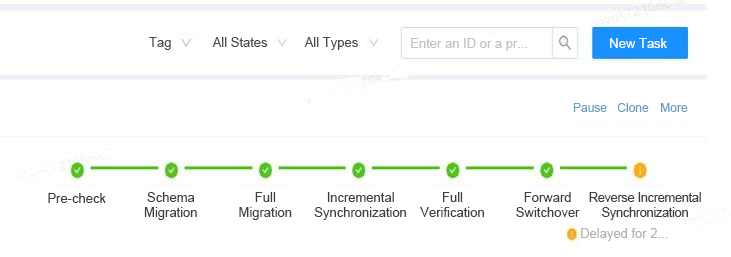
<style>
.page{position:relative;width:731px;height:257px;background:#ffffff}
.page>*{position:absolute;margin:0}
.t1{font:13px "ArialMT";color:#494949}
.t2{font:13px "ArialMT";color:#c2c2c2}
.t3{font:13px "ArialMT";color:#ffffff}
.t4{font:12px "ArialMT";color:#689ebe}
.t5{font:13px "ArialMT";color:#3f3f3f}
.t6{font:13px/15px "ArialMT";color:#3f3f3f}
.t7{font:13px/15px "ArialMT";letter-spacing:-0.03em;color:#3f3f3f}
.t8{font:13px "ArialMT";color:#b2b2b2}
</style>
<div class="page">
<p class="t1" style="left:149px;top:37px;width:22px;height:13px">Tag</p>
<p class="t1" style="left:212px;top:37px;width:56px;height:10px">All States</p>
<p class="t1" style="left:304px;top:37px;width:54px;height:13px">All Types</p>
<p class="t2" style="left:411px;top:38px;width:117px;height:13px">Enter an ID or a pr...</p>
<p class="t3" style="left:610px;top:38px;width:57px;height:10px">New Task</p>
<p class="t4" style="left:573px;top:103px;width:34px;height:9px">Pause</p>
<p class="t4" style="left:617px;top:103px;width:32px;height:9px">Clone</p>
<p class="t4" style="left:661px;top:103px;width:27px;height:9px">More</p>
<p class="t5" style="left:48px;top:193px;width:58px;height:10px">Pre-check</p>
<p class="t6" style="left:144px;top:192px;width:53px;height:28px;text-align:center">Schema Migration</p>
<p class="t6" style="left:239px;top:192px;width:53px;height:28px;text-align:center">Full Migration</p>
<p class="t6" style="left:314px;top:192px;width:92px;height:28px;text-align:center">Incremental Synchronization</p>
<p class="t6" style="left:420px;top:192px;width:64px;height:25px;text-align:center">Full Verification</p>
<p class="t6" style="left:516px;top:192px;width:64px;height:25px;text-align:center">Forward Switchover</p>
<p class="t7" style="left:589px;top:192px;width:112px;height:28px;text-align:center">Reverse Incremental Synchronization</p>
<p class="t8" style="left:581px;top:228px;width:87px;height:13px">Delayed for 2...</p>
</div>
